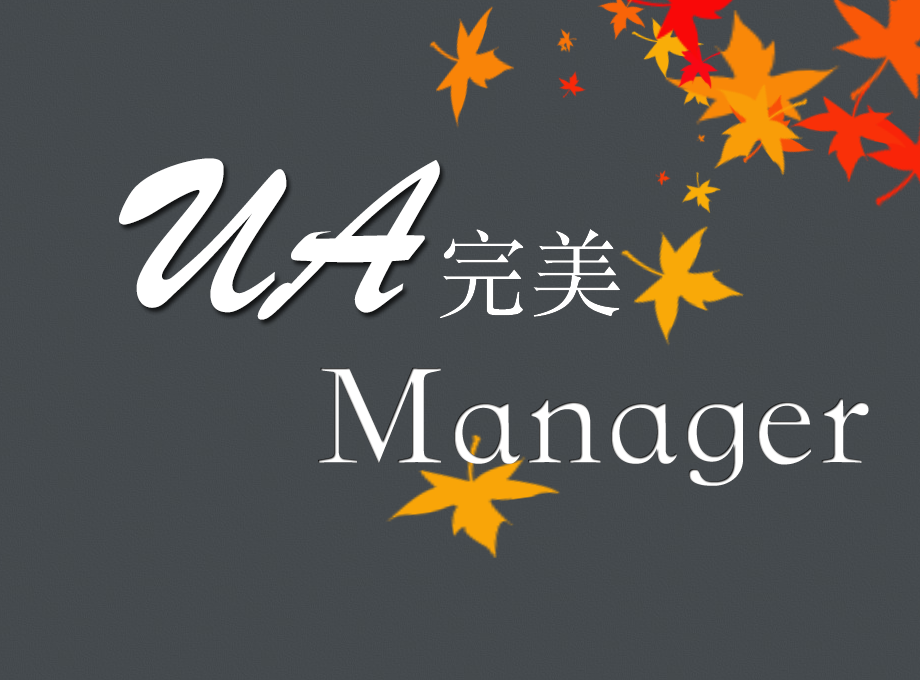
<style>
.page{position:relative;width:920px;height:680px;background:#454a4e}
.page>*{position:absolute;margin:0}
.t1{font:230px "BrushScriptMT";color:#ffffff}
.t2{font:95.1px "STSongti-TC-Regular";color:#ffffff}
.t3{font:150px "STKaiTi-TC-Regular";color:#ffffff}
</style>
<div class="page">
<p class="t1" style="left:119px;top:158px;width:321px;height:162px">UA</p>
<p class="t2" style="left:439px;top:229px;width:181px;height:90px">完美</p>
<p class="t3" style="left:318px;top:367px;width:551px;height:119px">Manager</p>
</div>
